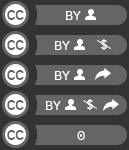
<style>
.page{position:relative;width:129px;height:150px;background:#636567}
.page>*{position:absolute;margin:0}
.t1{font:21px "Raavi";color:#636567;scale:0.9 1}
.t2{font:13.7px "Raavi";color:#ffffff;scale:0.92 1}
</style>
<div class="page">
<p class="t1" style="left:7px;top:10px;width:17px;height:10px">cc</p>
<p class="t2" style="left:66px;top:11px;width:15px;height:9px">BY</p>
<p class="t1" style="left:7px;top:40px;width:17px;height:10px">cc</p>
<p class="t2" style="left:55px;top:41px;width:15px;height:9px">BY</p>
<p class="t2" style="left:101px;top:39px;width:6px;height:11px">$</p>
<p class="t1" style="left:7px;top:70px;width:17px;height:10px">cc</p>
<p class="t2" style="left:55px;top:71px;width:15px;height:9px">BY</p>
<p class="t1" style="left:7px;top:100px;width:17px;height:10px">cc</p>
<p class="t2" style="left:46px;top:101px;width:15px;height:9px">BY</p>
<p class="t2" style="left:87px;top:99px;width:6px;height:11px">$</p>
<p class="t1" style="left:7px;top:130px;width:17px;height:10px">cc</p>
<p class="t2" style="left:77px;top:131px;width:8px;height:9px">0</p>
</div>
